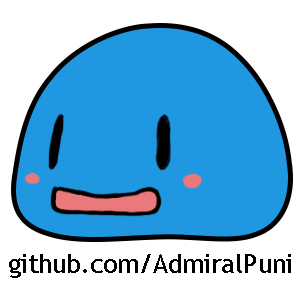
<style>
.page{position:relative;width:300px;height:300px;background:#2098e1}
.page>*{position:absolute;margin:0}
.t1{font:26px "TrebuchetMS";color:#000000}
</style>
<div class="page">
<p class="t1" style="left:9px;top:254px;width:282px;height:24px">github.com/AdmiralPuni</p>
</div>
